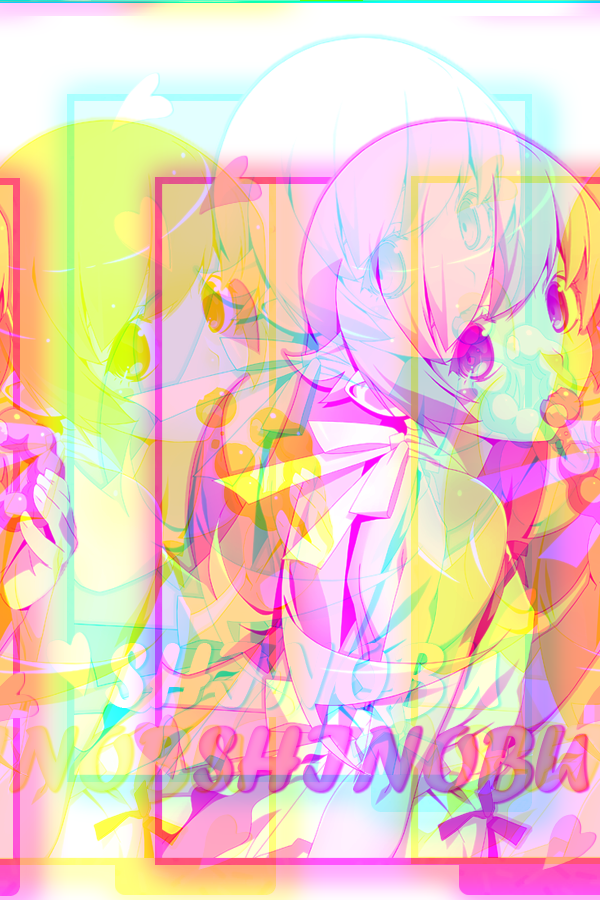
<style>
.page{position:relative;width:600px;height:900px}
.page>*{position:absolute;margin:0}
.t1{font:96.5px "ForteMT";scale:0.9 1}
</style>
<div class="page">
<p class="t1" style="left:105px;top:639px;width:394px;height:77px">SHINOBU</p>
</div>
